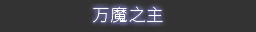
<style>
.page{position:relative;width:256px;height:32px;background:#333333}
.page>*{position:absolute;margin:0}
.t1{font:17px "NotoSansSC-Thin";letter-spacing:0.06em;color:#ffffff}
</style>
<div class="page">
<p class="t1" style="left:93px;top:6px;width:70px;height:17px">万魔之主</p>
</div>
